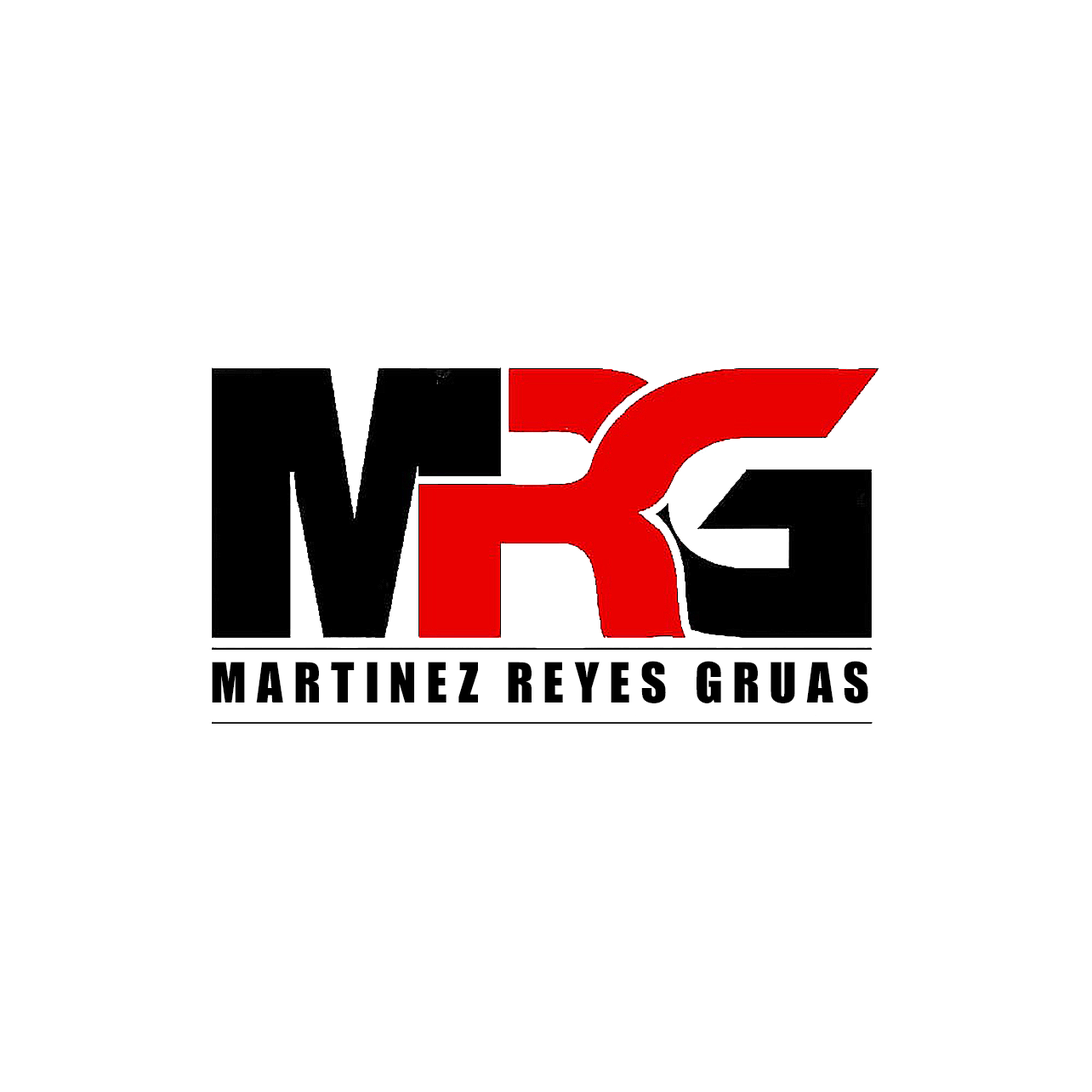
<style>
.page{position:relative;width:1092px;height:1092px;background:#ffffff}
.page>*{position:absolute;margin:0}
.t1{font:51px "Impact";letter-spacing:0.2em;color:#000000}
</style>
<div class="page">
<p class="t1" style="left:212px;top:661px;width:656px;height:42px">MARTINEZ REYES GRUAS</p>
</div>
